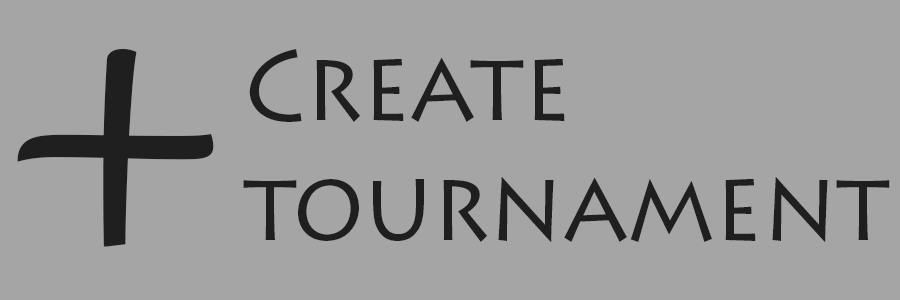
<style>
.page{position:relative;width:900px;height:300px;background:#a5a5a5}
.page>*{position:absolute;margin:0}
.t1{font:600px "Gabriola";color:#1f1f1f}
.t2{font:100px "LithosPro-Regular";color:#1f1f1f;scale:0.92 1}
</style>
<div class="page">
<p class="t1" style="left:17px;top:48px;width:197px;height:199px">+</p>
<p class="t2" style="left:243px;top:49px;width:647px;height:193px">Create <br>tournament</p>
</div>
